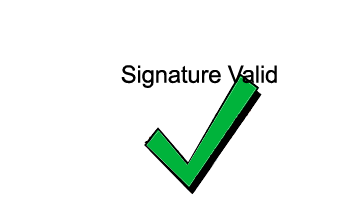
<style>
.page{position:relative;width:342px;height:221px;background:#ffffff}
.page>*{position:absolute;margin:0}
.t1{font:24px "ArialMT";letter-spacing:-0.01em;color:#000000}
</style>
<div class="page">
<p class="t1" style="left:121px;top:65px;width:156px;height:23px">Signature Valid</p>
</div>
